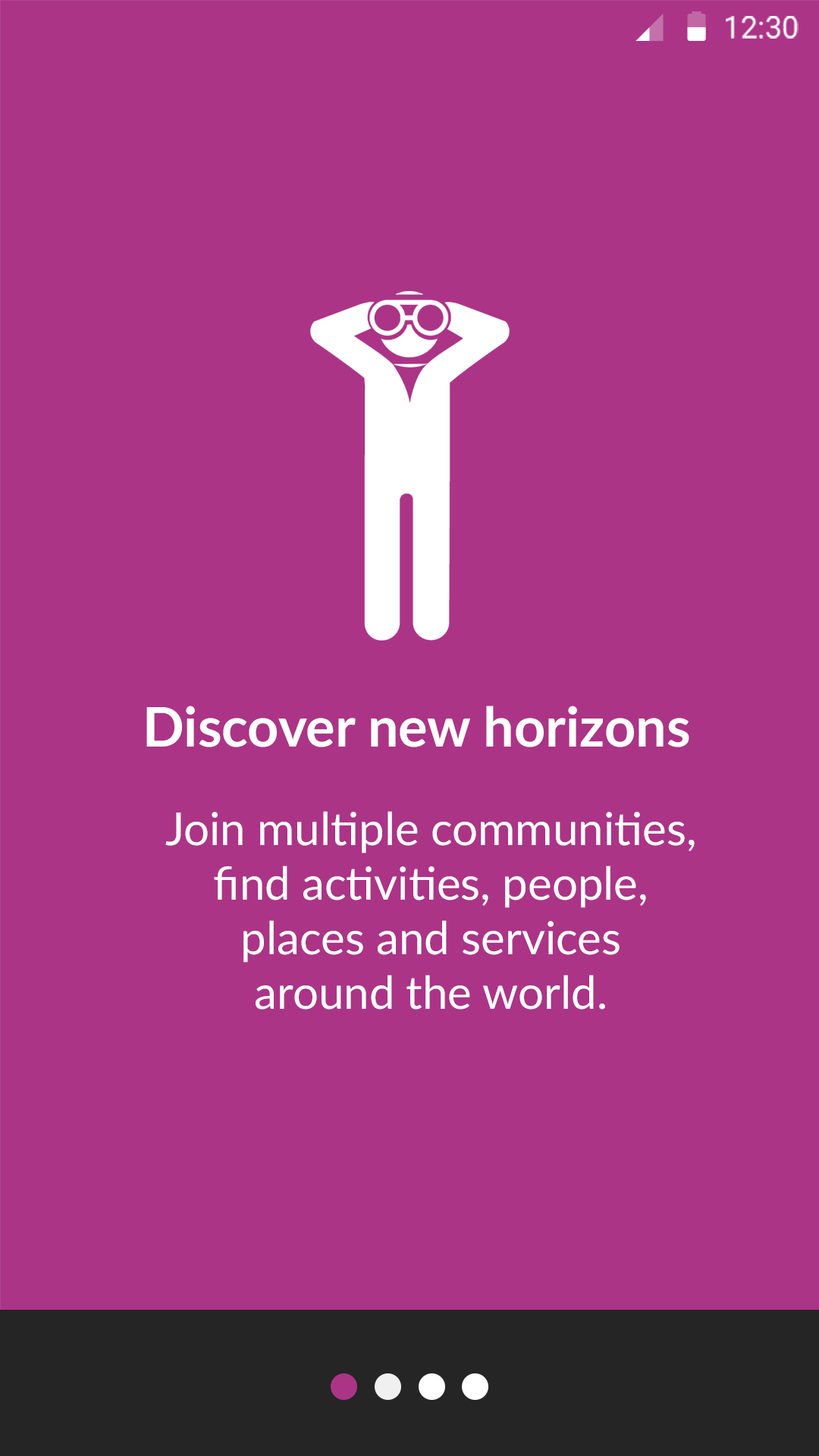
<style>
.page{position:relative;width:819px;height:1456px;background:#ab3486}
.page>*{position:absolute;margin:0}
.t1{font:30.3px "Roboto-Regular";color:#ffffff}
.t2{font:54.6px "Lato-Bold";color:#ffffff}
.t3{font:45.5px "Lato-Regular";color:#ffffff}
</style>
<div class="page">
<p class="t1" style="left:726px;top:16px;width:72px;height:23px">12:30</p>
<p class="t2" style="left:146px;top:706px;width:543px;height:42px">Discover new horizons</p>
<p class="t3" style="left:165px;top:811px;width:529px;height:199px;text-align:center">Join multiple communities, find activities, people, places and services <br>around the world.</p>
</div>
